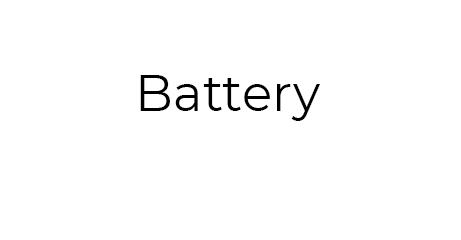
<style>
.page{position:relative;width:461px;height:240px;background:#ffffff}
.page>*{position:absolute;margin:0}
.t1{font:50px "Montserrat-Regular";color:#000000}
</style>
<div class="page">
<p class="t1" style="left:140px;top:75px;width:180px;height:46px">Battery</p>
</div>
